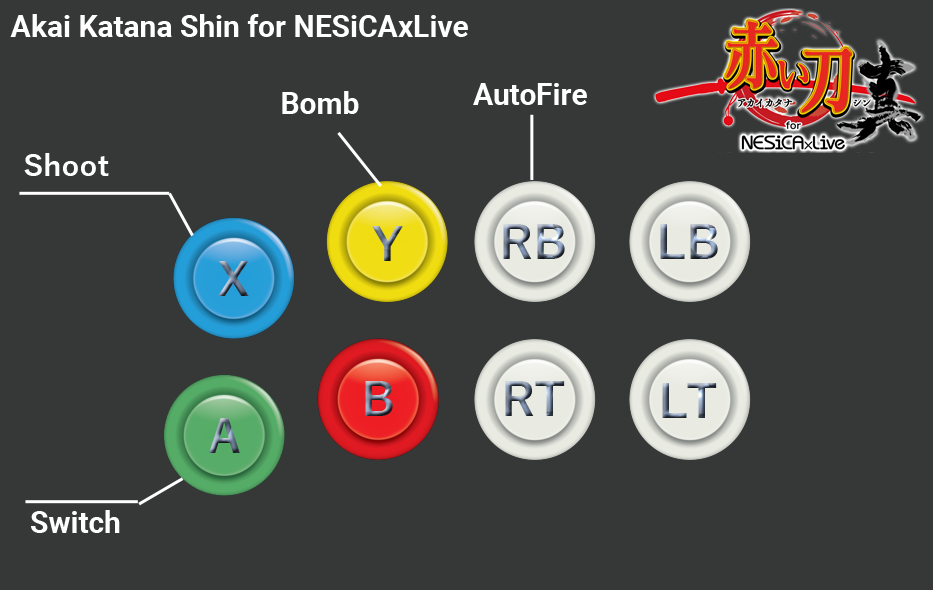
<style>
.page{position:relative;width:933px;height:590px;background:#363838}
.page>*{position:absolute;margin:0}
.t1{font:30px "Roboto-Bold";color:#ffffff}
.t2{font:30px "YuGothic-Bold";color:#ffffff}
</style>
<div class="page">
<p class="t1" style="left:10px;top:14px;width:458px;height:23px">Akai Katana Shin for NESiCAxLive</p>
<p class="t1" style="left:473px;top:83px;width:114px;height:22px">AutoFire</p>
<p class="t1" style="left:282px;top:91px;width:77px;height:23px">Bomb</p>
<p class="t2" style="left:24px;top:153px;width:85px;height:23px">Shoot</p>
<p class="t1" style="left:31px;top:510px;width:89px;height:23px">Switch</p>
</div>
